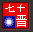
<style>
.page{position:relative;width:33px;height:32px;background:#f20000}
.page>*{position:absolute;margin:0}
.t1{font:10.4px "SimSun";color:#ffffff}
.t2{font:11.7px "SimSun";color:#ffffff}
</style>
<div class="page">
<p class="t1" style="left:5px;top:4px;width:20px;height:8px">七十</p>
<p class="t2" style="left:16px;top:15px;width:11px;height:12px">晋</p>
</div>
